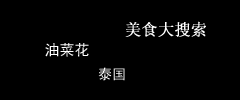
<style>
.page{position:relative;width:240px;height:100px;background:#000000}
.page>*{position:absolute;margin:0}
.t1{font:16px "NSimSun";color:#ffffff;font-weight:bold}
.t2{font:15px "SimHei";color:#ffffff}
.t3{font:14px "SimHei";color:#ffffff}
</style>
<div class="page">
<p class="t1" style="left:125px;top:21px;width:81px;height:16px">美食大搜索</p>
<p class="t2" style="left:45px;top:43px;width:44px;height:14px">油菜花</p>
<p class="t3" style="left:98px;top:67px;width:27px;height:14px">泰国</p>
</div>
